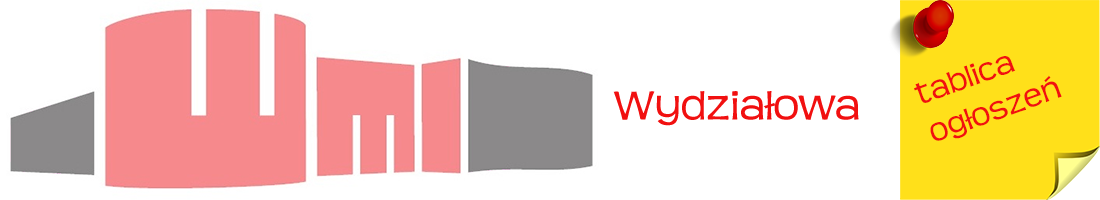
<style>
.page{position:relative;width:1100px;height:200px;background:#ffffff}
.page>*{position:absolute;margin:0}
.t1{font:33.5px "Teen";color:#f11010}
.t2{font:44.7px "Teen";color:#f11010}
</style>
<div class="page">
<p class="t1" style="left:914px;top:56px;width:148px;height:85px;rotate:-20deg">tablica ogłoszeń</p>
<p class="t2" style="left:613px;top:91px;width:246px;height:35px">Wydziałowa</p>
</div>
